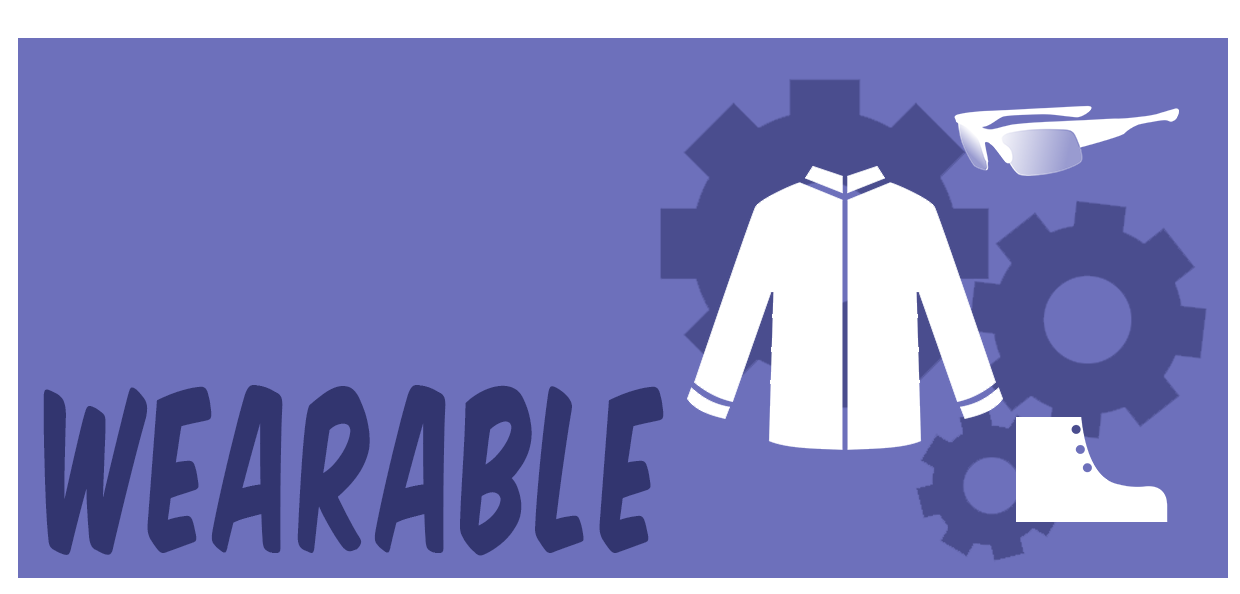
<style>
.page{position:relative;width:1240px;height:594px;background:#6d70bb}
.page>*{position:absolute;margin:0}
.t1{font:187.5px "KomikaAxis";letter-spacing:0.1em;color:#32356f;scale:0.53 1}
</style>
<div class="page">
<p class="t1" style="left:43px;top:385px;width:621px;height:171px">Wearable</p>
</div>
